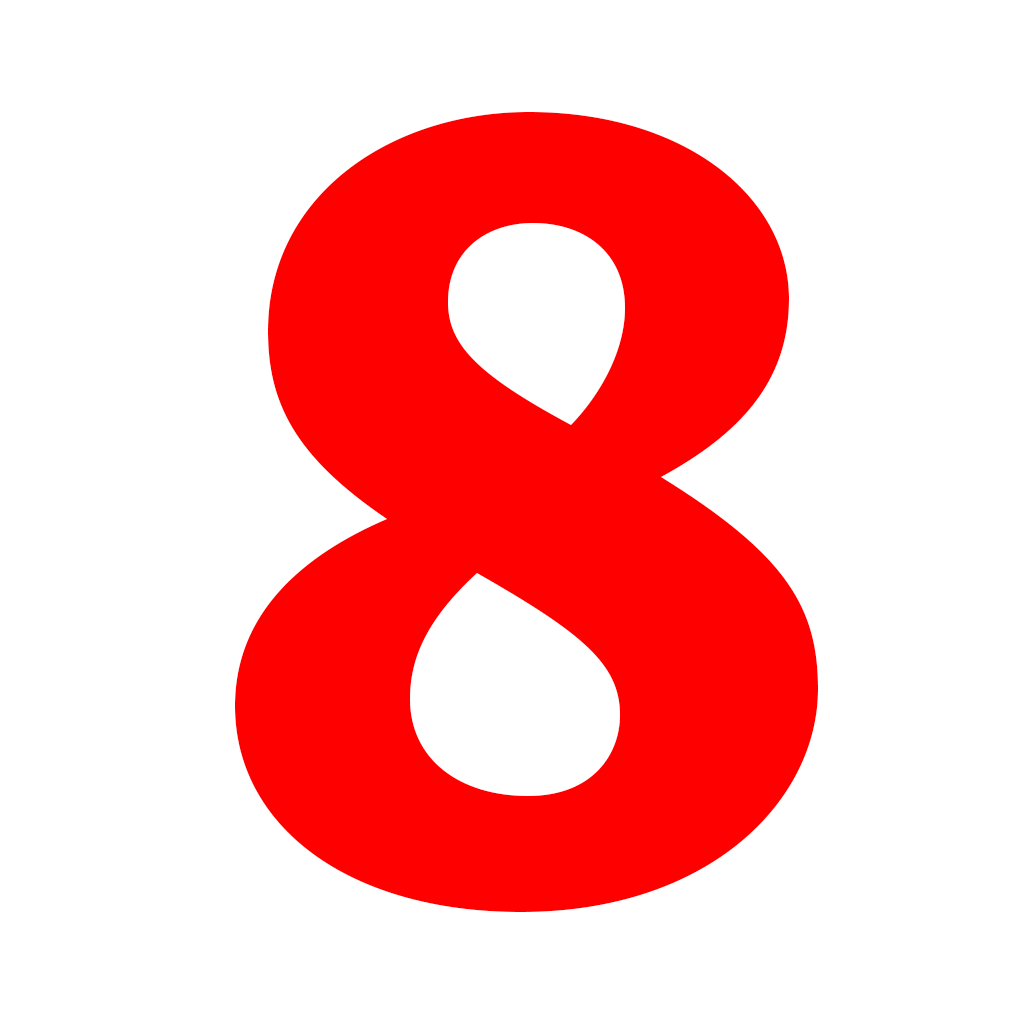
<style>
.page{position:relative;width:1024px;height:1024px;background:#ffffff}
.page>*{position:absolute;margin:0}
.t1{font:1000px "ToppanBunkyuMidashiGothicStdN-ExtraBold";color:#ff0000}
</style>
<div class="page">
<p class="t1" style="left:235px;top:112px;width:583px;height:800px">8</p>
</div>
